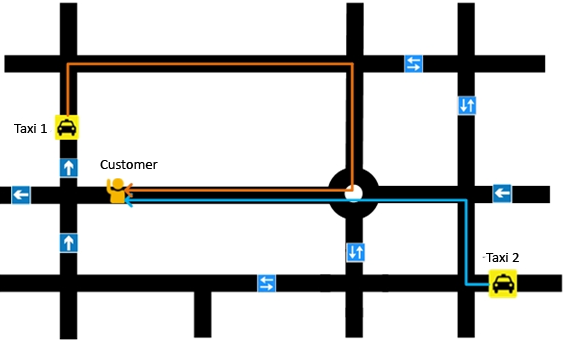
<style>
.page{position:relative;width:567px;height:343px;background:#ffffff}
.page>*{position:absolute;margin:0}
.t1{font:14.7px "Calibri";color:#000000}
</style>
<div class="page">
<p class="t1" style="left:14px;top:124px;width:33px;height:9px">Taxi 1</p>
<p class="t1" style="left:100px;top:160px;width:58px;height:9px">Customer</p>
<p class="t1" style="left:486px;top:253px;width:33px;height:9px">Taxi 2</p>
</div>
